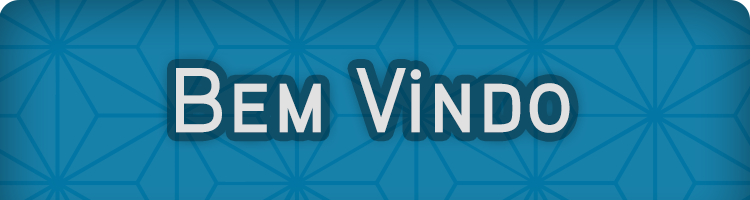
<style>
.page{position:relative;width:750px;height:200px;background:#1881aa}
.page>*{position:absolute;margin:0}
.t1{font:92.1px "AauxProMediumSC";color:#e1e1e1}
</style>
<div class="page">
<p class="t1" style="left:176px;top:68px;width:394px;height:65px">Bem Vindo</p>
</div>
